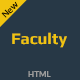
<style>
.page{position:relative;width:80px;height:80px;background:#273846}
.page>*{position:absolute;margin:0}
.t1{font:9px "Play"}
.t2{font:16px "Play-Bold";color:#f1c40f}
.t3{font:8px "Lato-Bold";color:#9c9c9c}
</style>
<div class="page">
<p class="t1" style="left:1px;top:1px;width:17px;height:17px;rotate:-45deg">New</p>
<p class="t2" style="left:12px;top:32px;width:55px;height:16px">Faculty</p>
<p class="t3" style="left:28px;top:71px;width:23px;height:6px">HTML</p>
</div>
